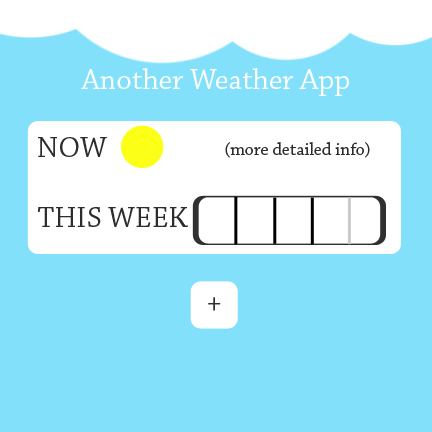
<style>
.page{position:relative;width:432px;height:432px;background:#83e0fa}
.page>*{position:absolute;margin:0}
.t1{font:30px "ChaparralPro-Regular";color:#ffffff}
.t2{font:30px "ChaparralPro-Regular";color:#2d2d2d}
.t3{font:18px "ChaparralPro-Regular";color:#2b2b2b}
.t4{font:30px "ChaparralPro-Regular";color:#303030}
</style>
<div class="page">
<p class="t1" style="left:81px;top:68px;width:268px;height:28px">Another Weather App</p>
<p class="t2" style="left:38px;top:137px;width:69px;height:20px">NOW</p>
<p class="t3" style="left:225px;top:142px;width:145px;height:16px">(more detailed info)</p>
<p class="t2" style="left:38px;top:207px;width:150px;height:20px">THIS WEEK</p>
<p class="t4" style="left:208px;top:297px;width:13px;height:14px">+</p>
</div>
